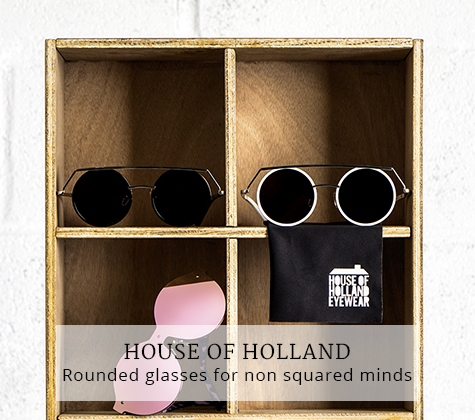
<style>
.page{position:relative;width:475px;height:420px}
.page>*{position:absolute;margin:0}
.t1{font:20px "Merriweather";letter-spacing:0.05em;color:#000000}
.t2{font:17px "OpenSans";letter-spacing:0.05em;color:#000000}
</style>
<div class="page">
<p class="t1" style="left:124px;top:343px;width:226px;height:17px">HOUSE OF HOLLAND</p>
<p class="t2" style="left:63px;top:368px;width:349px;height:17px">Rounded glasses for non squared minds</p>
</div>
